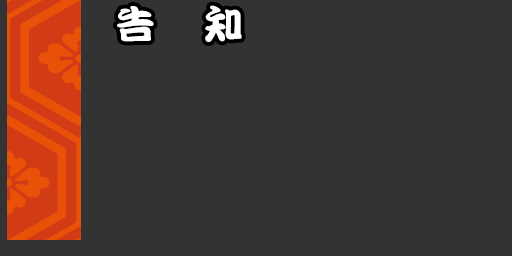
<style>
.page{position:relative;width:512px;height:256px;background:#333333}
.page>*{position:absolute;margin:0}
.t1{font:40px "DFPKanTingLiuW9";letter-spacing:0.1em;color:#ffffff}
</style>
<div class="page">
<p class="t1" style="left:117px;top:5px;width:125px;height:37px">告　知</p>
</div>
